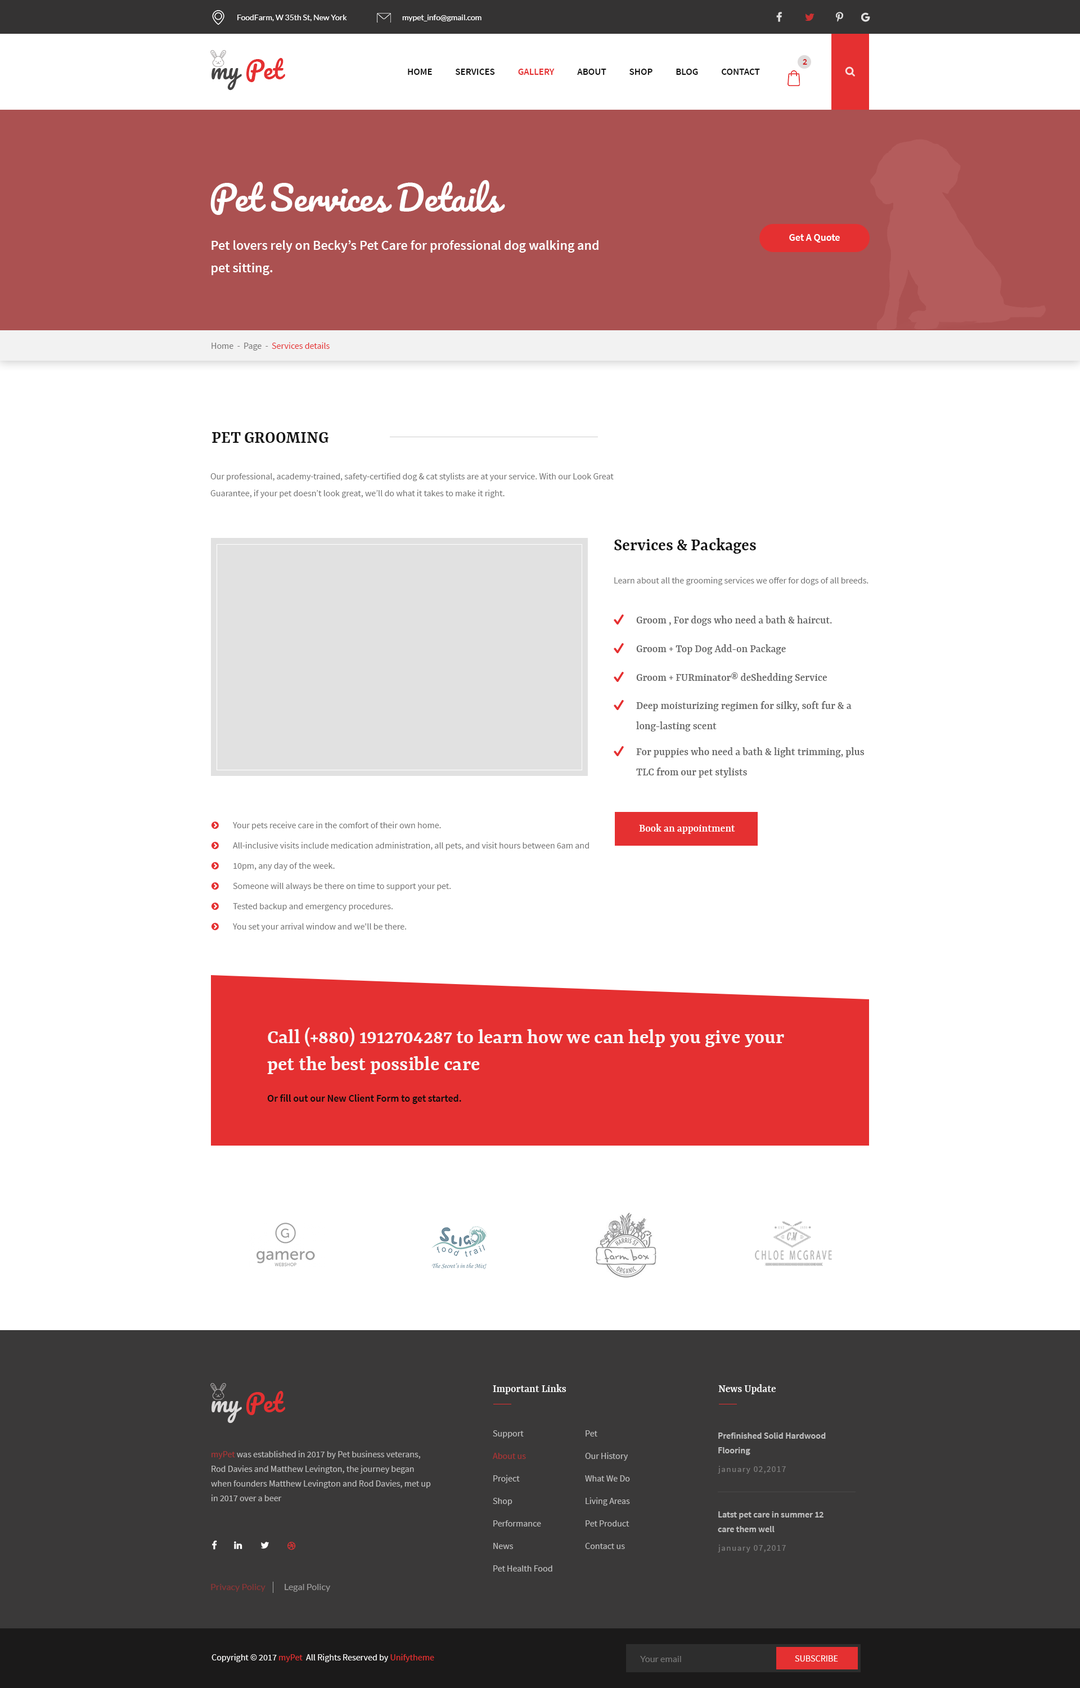
<style>
.page{position:relative;width:1080px;height:1688px;background:#ffffff}
.page>*{position:absolute;margin:0}
.t1{font:7.9px "Lato-Regular";color:#ffffff}
.t2{font:23.6px "Pacifico-Regular";color:#e53031}
.t3{font:23.6px "Pacifico-Regular";color:#454444}
.t4{font:9px "SourceSansPro-SemiBold";color:#d12526;text-transform:uppercase}
.t5{font:9.6px "SourceSansPro-SemiBold";color:#121212;text-transform:uppercase}
.t6{font:9.6px "SourceSansPro-SemiBold";color:#e53031;text-transform:uppercase}
.t7{font:33.8px "Pacifico-Regular";color:#ffffff}
.t8{font:13.5px/22.5px "SourceSansPro-SemiBold";color:#ffffff}
.t9{font:10.1px "SourceSansPro-SemiBold";color:#fffefe}
.t10{font:9px "SourceSansPro-Regular";color:#767575}
.t11{font:9px "SourceSansPro-Regular";color:#e53031}
.t12{font:18px "Yrsa-SemiBold";color:#121212}
.t13{font:9px/16.9px "SourceSansPro-Regular";color:#737373}
.t14{font:9px "SourceSansPro-Regular";color:#737373}
.t15{font:11.2px "Yrsa-Medium";color:#5f5f5f}
.t16{font:11.2px/20.2px "Yrsa-Medium";color:#5f5f5f}
.t17{font:9px/20.2px "SourceSansPro-Regular";color:#737373}
.t18{font:11.2px "Yrsa-Medium";color:#ffffff}
.t19{font:21.4px/27px "Yrsa-SemiBold";color:#f9f9f9}
.t20{font:10.1px "SourceSansPro-SemiBold";color:#0d0d0d}
.t21{font:23.6px "Pacifico-Regular";color:#dcdada}
.t22{font:9px/22.5px "SourceSansPro-Regular";color:#c0c0c0}
.t23{font:9px/14.6px "SourceSansPro-SemiBold";color:#c0c0c0}
.t24{font:9px/14.6px "SourceSansPro-Regular";color:#c0c0c0}
.t25{font:8.4px "SourceSansPro-Regular";letter-spacing:0.1em;color:#7d7d7d}
.t26{font:9px "Lato-Regular";color:#8e3536}
.t27{font:9px "Lato-Regular";color:#9c9b9b}
.t28{font:9px "SourceSansPro-Regular";color:#fefefe}
.t29{font:9px "Lato-Regular";color:#777777}
.t30{font:9px "SourceSansPro-Regular";color:#ffffff;text-transform:uppercase}
</style>
<div class="page">
<p class="t1" style="left:237px;top:15px;width:110px;height:6px">FoodFarm, W 35th St, New York</p>
<p class="t1" style="left:402px;top:15px;width:80px;height:6px">mypet_info@gmail.com</p>
<p class="t2" style="left:212px;top:58px;width:73px;height:32px"><span class="t3">my </span>Pet</p>
<p class="t4" style="left:803px;top:59px;width:4px;height:6px">2</p>
<p class="t5" style="left:408px;top:69px;width:352px;height:6px">Home            Services            <span class="t6">Gallery            </span>About            Shop            Blog            Contact</p>
<p class="t7" style="left:210px;top:180px;width:295px;height:35px">Pet Services Details</p>
<p class="t8" style="left:212px;top:240px;width:386px;height:35px">Pet lovers rely on Becky’s Pet Care for professional dog walking and pet sitting.</p>
<p class="t9" style="left:789px;top:234px;width:51px;height:8px">Get A Quote</p>
<p class="t10" style="left:212px;top:342px;width:118px;height:8px">Home  -  Page  - <span class="t11"> Services details</span></p>
<p class="t12" style="left:212px;top:432px;width:116px;height:11px">PET GROOMING</p>
<p class="t13" style="left:210px;top:472px;width:404px;height:26px">Our professional, academy-trained, safety-certified dog &amp; cat stylists are at your service. With our Look Great Guarantee, if your pet doesn’t look great, we’ll do what it takes to make it right.</p>
<p class="t12" style="left:614px;top:538px;width:142px;height:16px">Services &amp; Packages</p>
<p class="t14" style="left:614px;top:577px;width:254px;height:8px">Learn about all the grooming services we offer for dogs of all breeds.</p>
<p class="t15" style="left:636px;top:615px;width:196px;height:11px">Groom , For dogs who need a bath &amp; haircut.</p>
<p class="t15" style="left:636px;top:644px;width:150px;height:10px">Groom + Top Dog Add-on Package</p>
<p class="t15" style="left:636px;top:672px;width:191px;height:11px">Groom + FURminator® deShedding Service</p>
<p class="t16" style="left:636px;top:701px;width:216px;height:30px">Deep moisturizing regimen for silky, soft fur &amp; a <br>long-lasting scent</p>
<p class="t16" style="left:636px;top:747px;width:229px;height:30px">For puppies who need a bath &amp; light trimming, plus <br>TLC from our pet stylists</p>
<p class="t17" style="left:233px;top:821px;width:356px;height:110px">Your pets receive care in the comfort of their own home.<br>All-inclusive visits include medication administration, all pets, and visit hours between 6am and 10pm, any day of the week.<br>Someone will always be there on time to support your pet.<br>Tested backup and emergency procedures.<br>You set your arrival window and we'll be there.</p>
<p class="t18" style="left:639px;top:824px;width:96px;height:10px">Book an appointment</p>
<p class="t19" style="left:267px;top:1027px;width:517px;height:47px">Call (+880) 1912704287 to learn how we can help you give your pet the best possible care</p>
<p class="t20" style="left:267px;top:1094px;width:194px;height:10px">Or fill out our New Client Form to get started.</p>
<p class="t18" style="left:493px;top:1384px;width:73px;height:10px">Important Links</p>
<p class="t18" style="left:718px;top:1384px;width:58px;height:10px">News Update</p>
<p class="t2" style="left:212px;top:1390px;width:73px;height:33px"><span class="t21">my </span>Pet</p>
<p class="t22" style="left:493px;top:1430px;width:59px;height:141px">Support<br>About us <br>Project<br>Shop<br>Performance<br>News<br>Pet Health Food</p>
<p class="t22" style="left:585px;top:1430px;width:45px;height:119px">Pet<br>Our History<br>What We Do<br>Living Areas<br>Pet Product<br>Contact us</p>
<p class="t23" style="left:718px;top:1432px;width:108px;height:23px">Prefinished Solid Hardwood <br>Flooring</p>
<p class="t24" style="left:211px;top:1450px;width:220px;height:51px">myPet was established in 2017 by Pet business veterans, Rod Davies and Matthew Levington, the journey began when founders Matthew Levington and Rod Davies, met up in 2017 over a beer</p>
<p class="t25" style="left:718px;top:1465px;width:68px;height:8px">january 02,2017</p>
<p class="t23" style="left:718px;top:1511px;width:106px;height:21px">Latst pet care in summer 12<br>care them well</p>
<p class="t25" style="left:718px;top:1544px;width:68px;height:8px">january 07,2017</p>
<p class="t26" style="left:211px;top:1583px;width:55px;height:8px">Privacy Policy</p>
<p class="t27" style="left:285px;top:1583px;width:45px;height:8px">Legal Policy</p>
<p class="t28" style="left:212px;top:1653px;width:222px;height:9px">Copyright © 2017 <span class="t11">myPet </span> All Rights Reserved by <span class="t11">Unifytheme</span></p>
<p class="t29" style="left:640px;top:1655px;width:41px;height:7px">Your email</p>
<p class="t30" style="left:795px;top:1655px;width:43px;height:6px">Subscribe</p>
</div>
